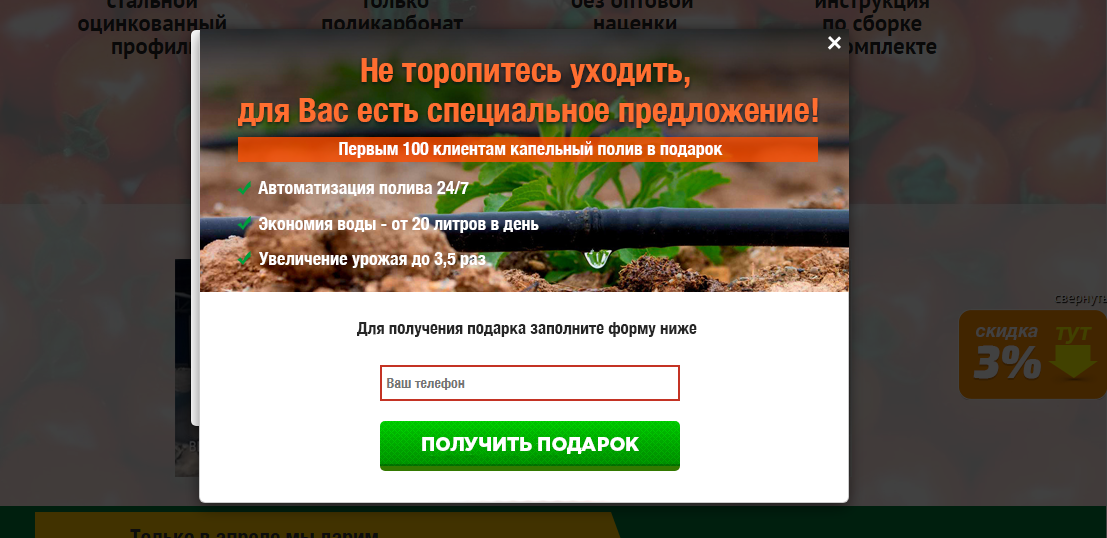
<style>
.page{position:relative;width:1107px;height:538px}
.page>*{position:absolute;margin:0}
.t1{font:34px/40px "HelveticaNeueBoldCondensed";color:#ff6e30}
.t2{font:18px "HelveticaNeueBoldCondensed";color:#ffffff}
.t3{font:17px "HelveticaNeueBoldCondensed";color:#262626}
.t4{font:19px "GothamPro-Black";color:#ffffff}
</style>
<div class="page">
<p class="t1" style="left:238px;top:58px;width:580px;height:70px;text-align:center">Не торопитесь уходить, <br>для Вас есть специальное предложение!</p>
<p class="t2" style="left:339px;top:141px;width:384px;height:17px">Первым 100 клиентам капельный полив в подарок</p>
<p class="t2" style="left:258px;top:181px;width:211px;height:15px">Автоматизация полива 24/7</p>
<p class="t2" style="left:259px;top:217px;width:280px;height:16px">Экономия воды - от 20 литров в день</p>
<p class="t2" style="left:259px;top:252px;width:227px;height:16px">Увеличение урожая до 3,5 раз</p>
<p class="t3" style="left:357px;top:322px;width:340px;height:15px">Для получения подарка заполните форму ниже</p>
<p class="t4" style="left:422px;top:437px;width:217px;height:17px">ПОЛУЧИТЬ ПОДАРОК</p>
</div>
